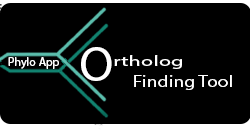
<style>
.page{position:relative;width:250px;height:130px;background:#000000}
.page>*{position:absolute;margin:0}
.t1{font:50px "MyriadPro-Regular";color:#ffffff}
.t2{font:12px "MyriadPro-Regular";color:#ffffff}
.t3{font:14.6px "MyriadPro-Regular";color:#ffffff;scale:1.54 1}
.t4{font:11.4px "MyriadPro-Regular";color:#ffffff;scale:1.54 1}
.t5{font:16.6px "MyriadPro-Regular";color:#ffffff;scale:1.18 1}
</style>
<div class="page">
<p class="t1" style="left:81px;top:47px;width:31px;height:34px">O</p>
<p class="t2" style="left:8px;top:57px;width:51px;height:12px">Phylo App</p>
<p class="t3" style="left:114px;top:55px;width:68px;height:14px"><span class="t4">       </span>rtholog</p>
<p class="t5" style="left:134px;top:75px;width:98px;height:15px">Finding Tool</p>
</div>
